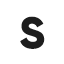
<style>
.page{position:relative;width:64px;height:64px;background:#ffffff}
.page>*{position:absolute;margin:0}
.t1{font:44px "Gilroy-ExtraBold";letter-spacing:0.05em;color:#1d1d1d}
</style>
<div class="page">
<p class="t1" style="left:20px;top:16px;width:25px;height:33px">S</p>
</div>
